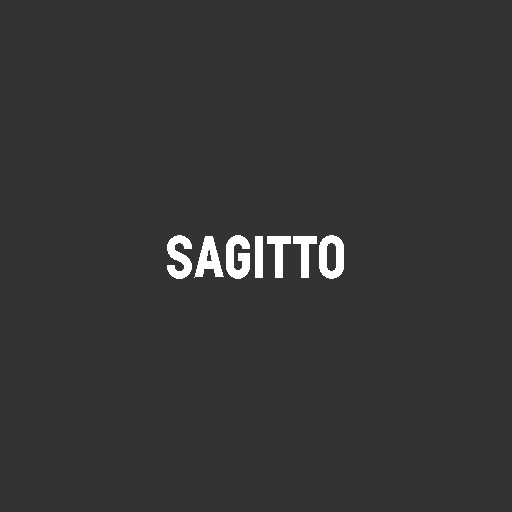
<style>
.page{position:relative;width:512px;height:512px;background:#333333}
.page>*{position:absolute;margin:0}
.t1{font:42px "NTCornelia-Regular";color:#fffefe}
</style>
<div class="page">
<p class="t1" style="left:167px;top:235px;width:177px;height:44px">sagitto</p>
</div>
